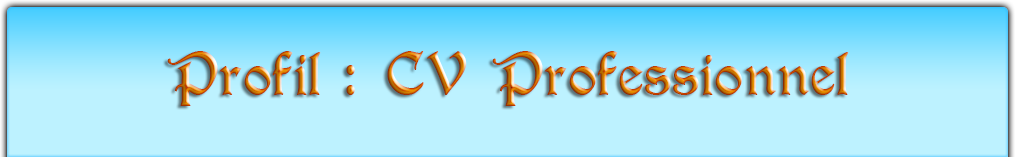
<style>
.page{position:relative;width:1015px;height:157px;background:#bdf2ff}
.page>*{position:absolute;margin:0}
.t1{font:56.7px "T4C-Beaulieux"}
</style>
<div class="page">
<p class="t1" style="left:167px;top:51px;width:682px;height:55px">Profil : CV Professionnel</p>
</div>
